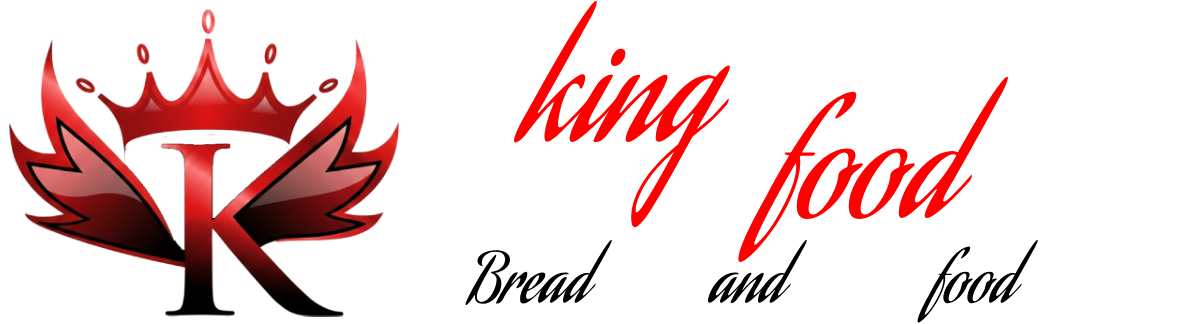
<style>
.page{position:relative;width:1200px;height:324px;background:#ffffff}
.page>*{position:absolute;margin:0}
.t1{font:150px "AguafinaScript-Regular";color:#ff0000}
.t2{font:67px "AguafinaScript-Regular";color:#000000}
</style>
<div class="page">
<p class="t1" style="left:514px;top:1px;width:216px;height:227px">king</p>
<p class="t1" style="left:738px;top:76px;width:270px;height:186px">food</p>
<p class="t2" style="left:465px;top:239px;width:573px;height:84px">Bread          and            food</p>
</div>
